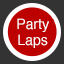
<style>
.page{position:relative;width:64px;height:64px;background:#bd0000}
.page>*{position:absolute;margin:0}
.t1{font:14px/16px "Helvetica";color:#ffffff}
</style>
<div class="page">
<p class="t1" style="left:17px;top:18px;width:32px;height:30px;text-align:center">Party<br>Laps</p>
</div>
